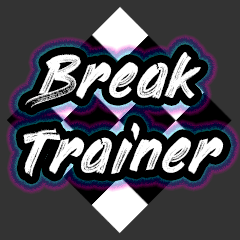
<style>
.page{position:relative;width:240px;height:240px;background:#333333}
.page>*{position:absolute;margin:0}
.t1{font:62px "PaintingWithChocolate";color:#ffffff}
</style>
<div class="page">
<p class="t1" style="left:23px;top:52px;width:201px;height:125px;text-align:center">Break<br>Trainer</p>
</div>
